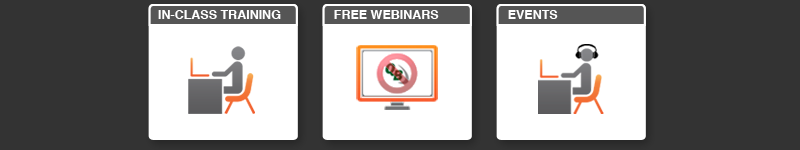
<style>
.page{position:relative;width:800px;height:150px;background:#333333}
.page>*{position:absolute;margin:0}
.t1{font:12.5px "Helvetica-Bold";color:#ffffff}
</style>
<div class="page">
<p class="t1" style="left:158px;top:10px;width:123px;height:9px">IN-CLASS TRAINING</p>
<p class="t1" style="left:334px;top:10px;width:105px;height:9px">FREE WEBINARS</p>
<p class="t1" style="left:508px;top:10px;width:50px;height:9px">EVENTS</p>
</div>
